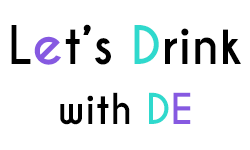
<style>
.page{position:relative;width:250px;height:150px;background:#ffffff}
.page>*{position:absolute;margin:0}
.t1{font:50px/60px "CaviarDreams-Bold";color:#000000}
.t2{font:50px/60px "CaviarDreams-Bold";color:#8659e1}
.t3{font:50px/60px "CaviarDreams-Bold";color:#2fd9cd}
.t4{font:40px/60px "CaviarDreams-Bold";color:#000000}
.t5{font:40px/60px "CaviarDreams-Bold";color:#2fd9cd}
.t6{font:40px/60px "CaviarDreams-Bold";color:#8659e1}
</style>
<div class="page">
<p class="t1" style="left:11px;top:24px;width:230px;height:101px;text-align:center">L<span class="t2">e</span>t’s <span class="t3">D</span>rink<br><span class="t4">with </span><span class="t5">D</span><span class="t6">E</span></p>
</div>
